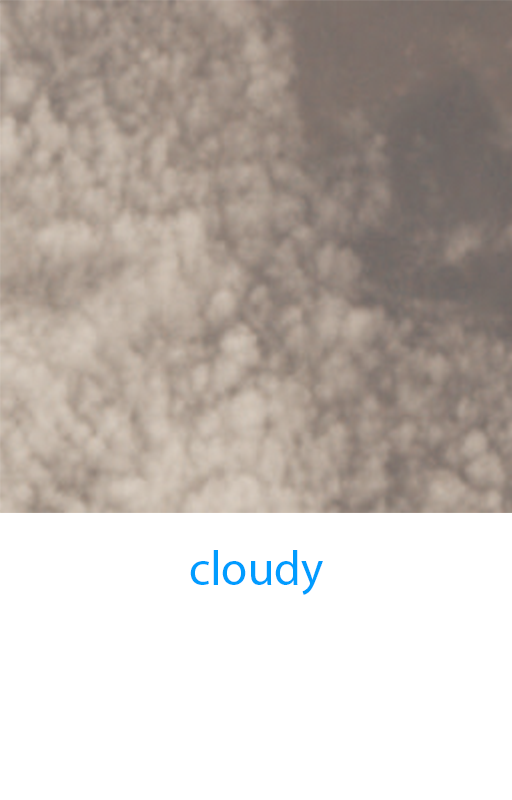
<style>
.page{position:relative;width:512px;height:800px;background:#ffffff}
.page>*{position:absolute;margin:0}
.t1{font:48px "MyriadPro-Regular";color:#009cff}
</style>
<div class="page">
<p class="t1" style="left:190px;top:550px;width:133px;height:45px">cloudy</p>
</div>
